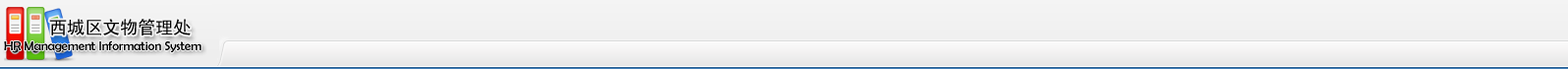
<style>
.page{position:relative;width:1568px;height:69px}
.page>*{position:absolute;margin:0}
.t1{font:17.7px "SimHei";color:#000000}
.t2{font:12.8px "BerlinSansFB-Reg";color:#000000}
</style>
<div class="page">
<p class="t1" style="left:49px;top:19px;width:142px;height:16px">西城区文物管理处</p>
<p class="t2" style="left:4px;top:40px;width:198px;height:12px">HR Management Information System</p>
</div>
